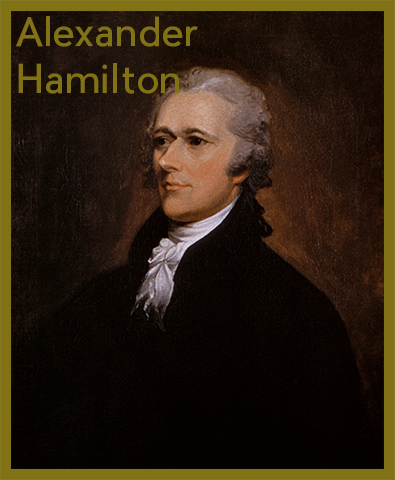
<style>
.page{position:relative;width:395px;height:480px}
.page>*{position:absolute;margin:0}
.t1{font:39px "PierSans";color:#807215}
</style>
<div class="page">
<p class="t1" style="left:16px;top:16px;width:182px;height:78px">Alexander<br>Hamilton</p>
</div>
